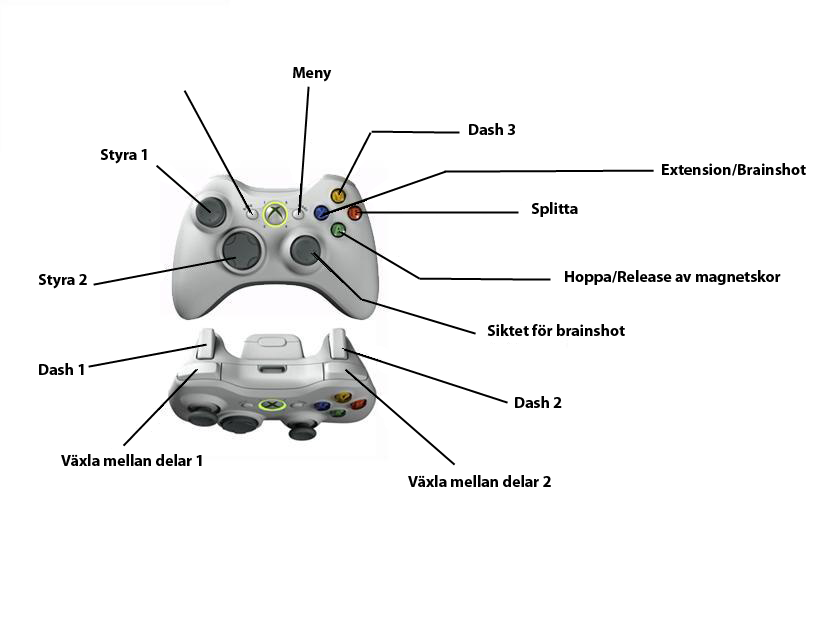
<style>
.page{position:relative;width:818px;height:624px;background:#ffffff}
.page>*{position:absolute;margin:0}
.t1{font:16px "MyriadPro-Bold";color:#000000}
</style>
<div class="page">
<p class="t1" style="left:293px;top:67px;width:39px;height:15px">Meny</p>
<p class="t1" style="left:469px;top:123px;width:46px;height:12px">Dash 3</p>
<p class="t1" style="left:100px;top:149px;width:47px;height:15px">Styra 1</p>
<p class="t1" style="left:662px;top:163px;width:144px;height:13px">Extension/Brainshot</p>
<p class="t1" style="left:531px;top:202px;width:47px;height:15px">Splitta</p>
<p class="t1" style="left:565px;top:270px;width:216px;height:15px">Hoppa/Release av magnetskor</p>
<p class="t1" style="left:38px;top:274px;width:49px;height:15px">Styra 2</p>
<p class="t1" style="left:487px;top:324px;width:138px;height:12px">Siktet för brainshot</p>
<p class="t1" style="left:39px;top:363px;width:45px;height:12px">Dash 1</p>
<p class="t1" style="left:515px;top:396px;width:47px;height:12px">Dash 2</p>
<p class="t1" style="left:61px;top:454px;width:141px;height:12px">Växla mellan delar 1</p>
<p class="t1" style="left:408px;top:475px;width:143px;height:12px">Växla mellan delar 2</p>
</div>
